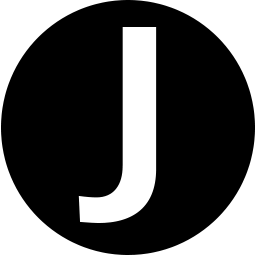
<style>
.page{position:relative;width:256px;height:256px;background:#000000}
.page>*{position:absolute;margin:0}
.t1{font:247.6px "YuGothic-Bold";color:#ffffff}
</style>
<div class="page">
<p class="t1" style="left:78px;top:27px;width:79px;height:196px">J</p>
</div>
